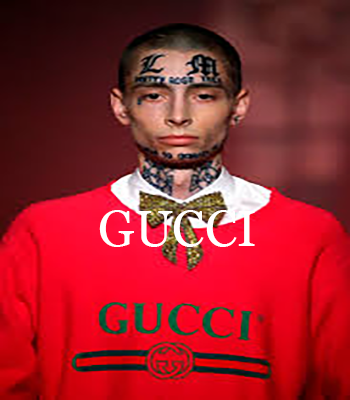
<style>
.page{position:relative;width:350px;height:400px}
.page>*{position:absolute;margin:0}
.t1{font:50px "Georgia";color:#fffefe}
</style>
<div class="page">
<p class="t1" style="left:99px;top:210px;width:156px;height:37px">GUCCI</p>
</div>
